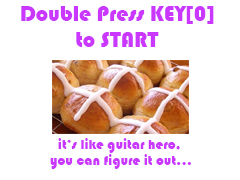
<style>
.page{position:relative;width:240px;height:180px;background:#ffffff}
.page>*{position:absolute;margin:0}
.t1{font:22px "Bauhaus93";color:#ca37ff}
.t2{font:14px "Bauhaus93";color:#ca37ff}
</style>
<div class="page">
<p class="t1" style="left:21px;top:6px;width:193px;height:41px;text-align:center">Double Press KEY[0]<br>to START</p>
<p class="t2" style="left:50px;top:138px;width:141px;height:31px;text-align:center">it’s like guitar hero, <br>you can figure it out...</p>
</div>
